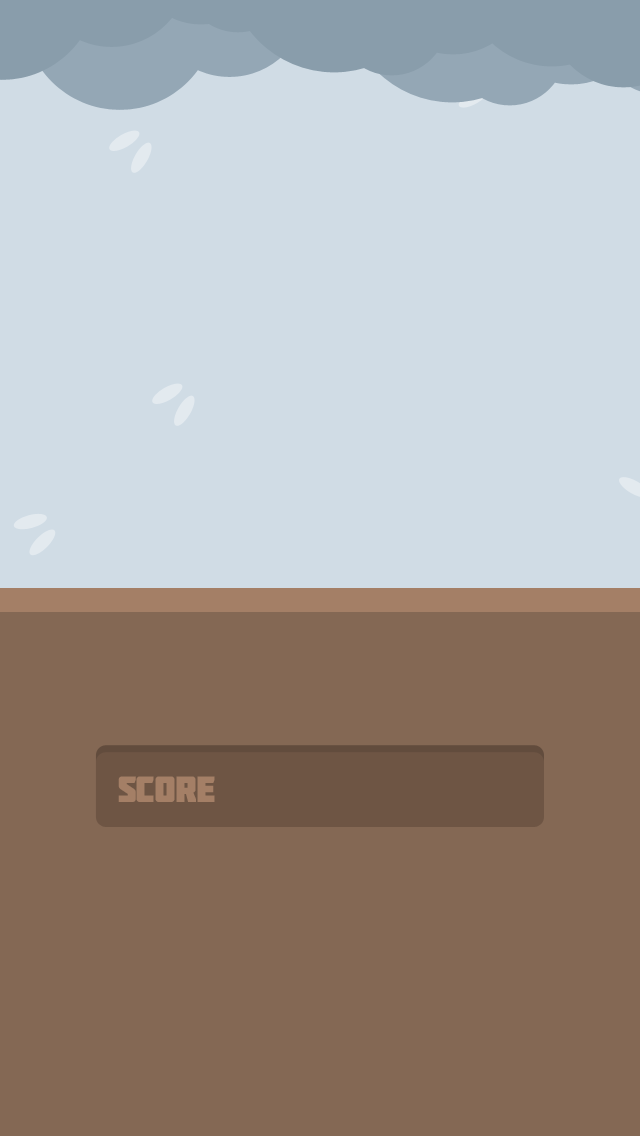
<style>
.page{position:relative;width:640px;height:1136px;background:#d0dce5}
.page>*{position:absolute;margin:0}
.t1{font:36.5px "Molot";letter-spacing:-0.02em;color:#a47f66}
</style>
<div class="page">
<p class="t1" style="left:118px;top:776px;width:97px;height:26px">Score</p>
</div>
